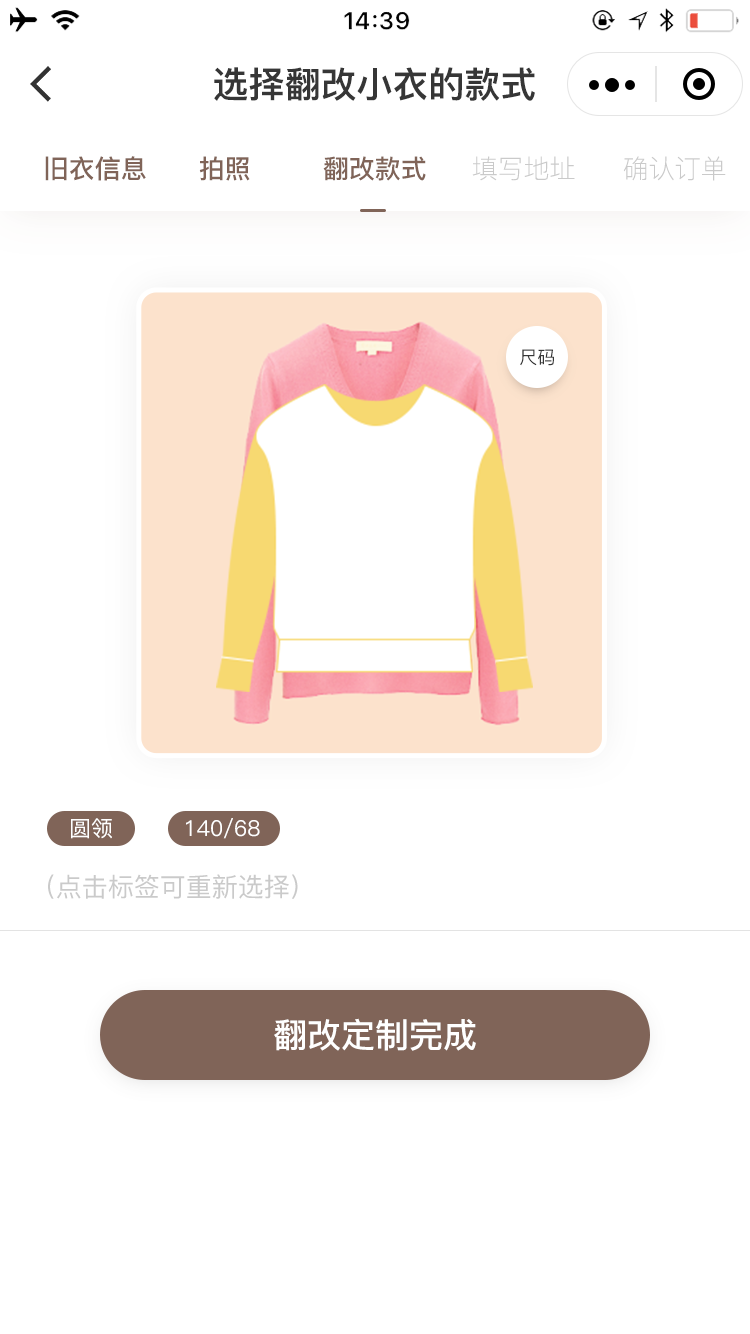
<style>
.page{position:relative;width:750px;height:1334px;background:#ffffff}
.page>*{position:absolute;margin:0}
.t1{font:36px "PingFang-SC-Heavy";color:#363636}
.t2{font:26px "PingFang-SC-Bold";color:#806458}
.t3{font:26px "PingFang-SC-Light";color:#cacaca}
.t4{font:18px "PingFang-SC-Medium";color:#363636}
.t5{font:22px "PingFang-SC-Medium";color:#ffffff}
.t6{font:26px "PingFang-SC-Medium";color:#cacaca}
.t7{font:34px "PingFang-SC-Bold";color:#ffffff}
</style>
<div class="page">
<p class="t1" style="left:214px;top:67px;width:321px;height:34px">选择翻改小衣的款式</p>
<p class="t2" style="left:45px;top:156px;width:101px;height:25px">旧衣信息</p>
<p class="t2" style="left:199px;top:156px;width:51px;height:25px">拍照</p>
<p class="t2" style="left:323px;top:156px;width:103px;height:25px">翻改款式</p>
<p class="t3" style="left:472px;top:156px;width:103px;height:25px">填写地址</p>
<p class="t3" style="left:623px;top:156px;width:103px;height:25px">确认订单</p>
<p class="t4" style="left:520px;top:349px;width:34px;height:17px">尺码</p>
<p class="t5" style="left:71px;top:818px;width:41px;height:21px">圆领</p>
<p class="t5" style="left:186px;top:818px;width:74px;height:21px">140/68</p>
<p class="t6" style="left:48px;top:874px;width:250px;height:25px">（点击标签可重新选择）</p>
<p class="t7" style="left:274px;top:1018px;width:202px;height:33px">翻改定制完成</p>
</div>
